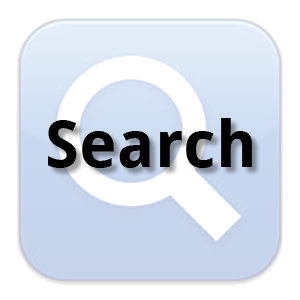
<style>
.page{position:relative;width:300px;height:300px;background:#ffffff}
.page>*{position:absolute;margin:0}
.t1{font:112px "DroidSans-Bold";color:#000000}
</style>
<div class="page">
<p class="t1" style="left:48px;top:118px;width:204px;height:50px">Search</p>
</div>
